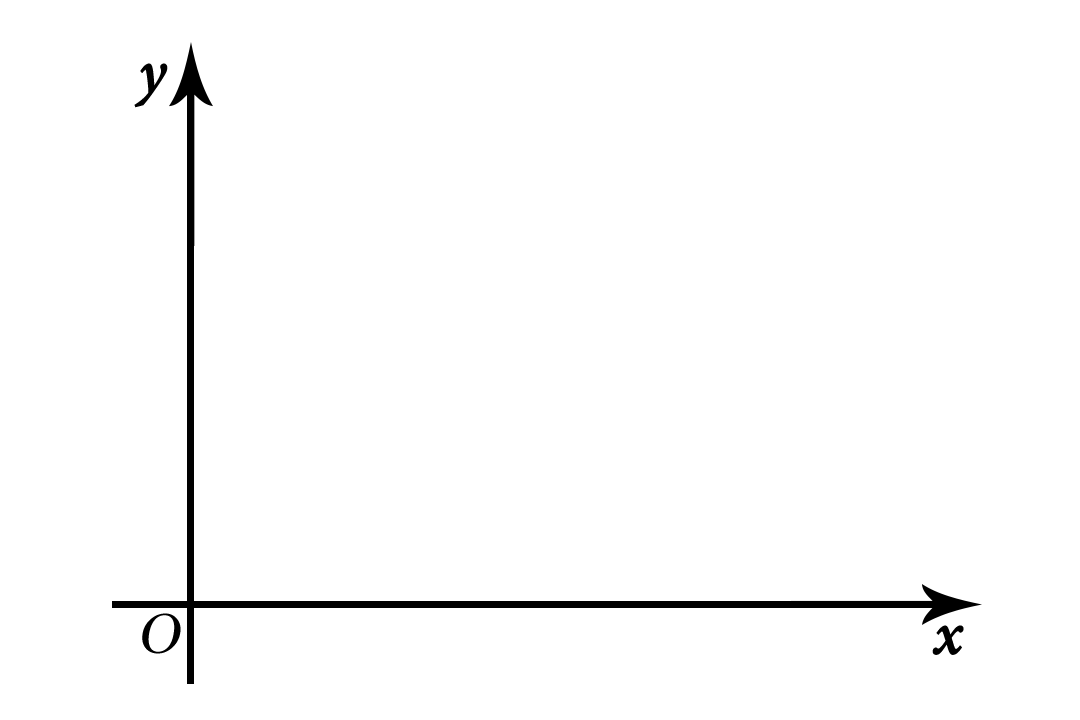
<style>
.page{position:relative;width:1080px;height:720px;background:#ffffff}
.page>*{position:absolute;margin:0}
.t1{font:66.7px "AdobeDevanagari-BoldItalic";color:#000000;font-weight:bold}
.t2{font:58.3px "TimesNewRomanPSMT";color:#000000;font-style:italic}
</style>
<div class="page">
<p class="t1" style="left:134px;top:63px;width:34px;height:45px">y</p>
<p class="t2" style="left:142px;top:613px;width:39px;height:41px">O</p>
<p class="t1" style="left:932px;top:625px;width:32px;height:30px">x</p>
</div>
